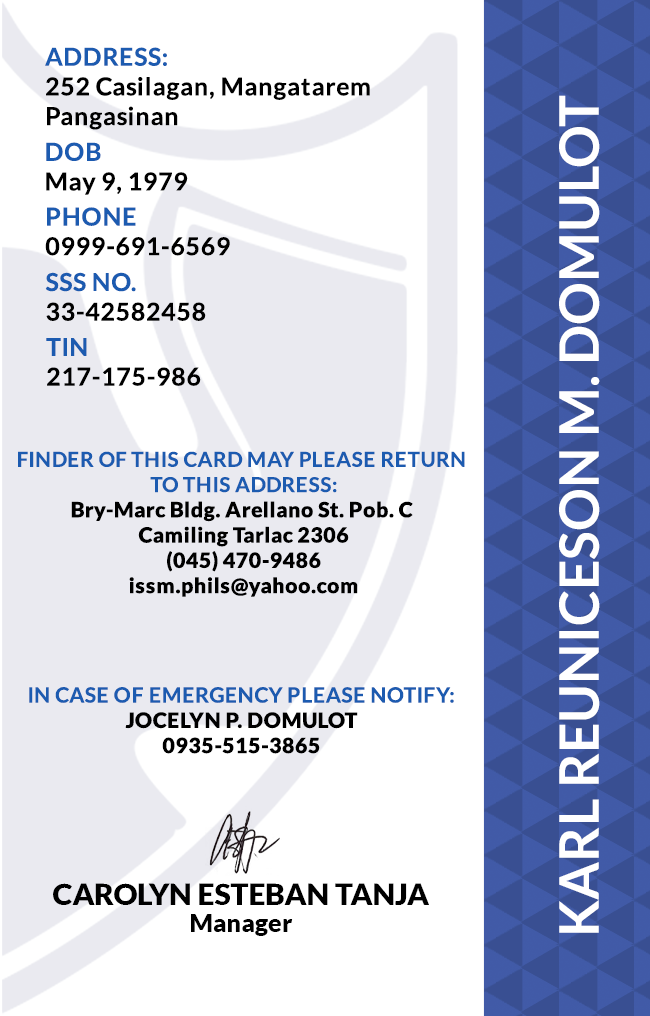
<style>
.page{position:relative;width:650px;height:1016px;background:#ffffff}
.page>*{position:absolute;margin:0}
.t1{font:24.7px/29.6px "Lato-Bold";letter-spacing:0.025em;color:#000000}
.t2{font:54.2px "Lato-Bold";color:#ffffff}
.t3{font:24.7px/29.6px "Lato-Bold";letter-spacing:0.025em}
.t4{font:21.1px "Lato-Black";letter-spacing:0.025em}
.t5{font:20.5px/25.3px "Lato-Bold";letter-spacing:0.025em;text-transform:uppercase}
.t6{font:21.1px/25.3px "Lato-Bold";letter-spacing:0.025em}
.t7{font:29.5px "Lato-Black";color:#000000}
.t8{font:25px "Lato-Black";color:#000000}
</style>
<div class="page">
<p class="t1" style="left:45px;top:47px;width:325px;height:83px">ADDRESS:<br>252 Casilagan, Mangatarem<br>Pangasinan</p>
<p class="t2" style="left:559px;top:95px;width:41px;height:838px;rotate:-90deg">KARL REUNICESON M. DOMULOT</p>
<p class="t3" style="left:46px;top:142px;width:142px;height:53px">DOB<br>May 9, 1979</p>
<p class="t3" style="left:45px;top:207px;width:185px;height:49px">PHONE <br>0999-691-6569</p>
<p class="t3" style="left:45px;top:272px;width:161px;height:49px">SSS NO.<br>33-42582458</p>
<p class="t1" style="left:46px;top:338px;width:155px;height:48px">TIN<br>217-175-986</p>
<p class="t4" style="left:18px;top:451px;width:447px;height:146px;text-align:center"><span class="t5">Finder of this card may please return <br>to this address:<br></span>Bry-Marc Bldg. Arellano St. Pob. C <br>Camiling Tarlac 2306<br>(045) 470-9486<br>issm.phils@yahoo.com</p>
<p class="t6" style="left:29px;top:687px;width:425px;height:67px;text-align:center">IN CASE OF EMERGENCY PLEASE NOTIFY:<br><span class="t4">JOCELYN P. DOMULOT<br>0935-515-3865</span></p>
<p class="t7" style="left:53px;top:883px;width:376px;height:22px">CAROLYN ESTEBAN TANJA</p>
<p class="t8" style="left:191px;top:914px;width:102px;height:22px">Manager</p>
</div>
